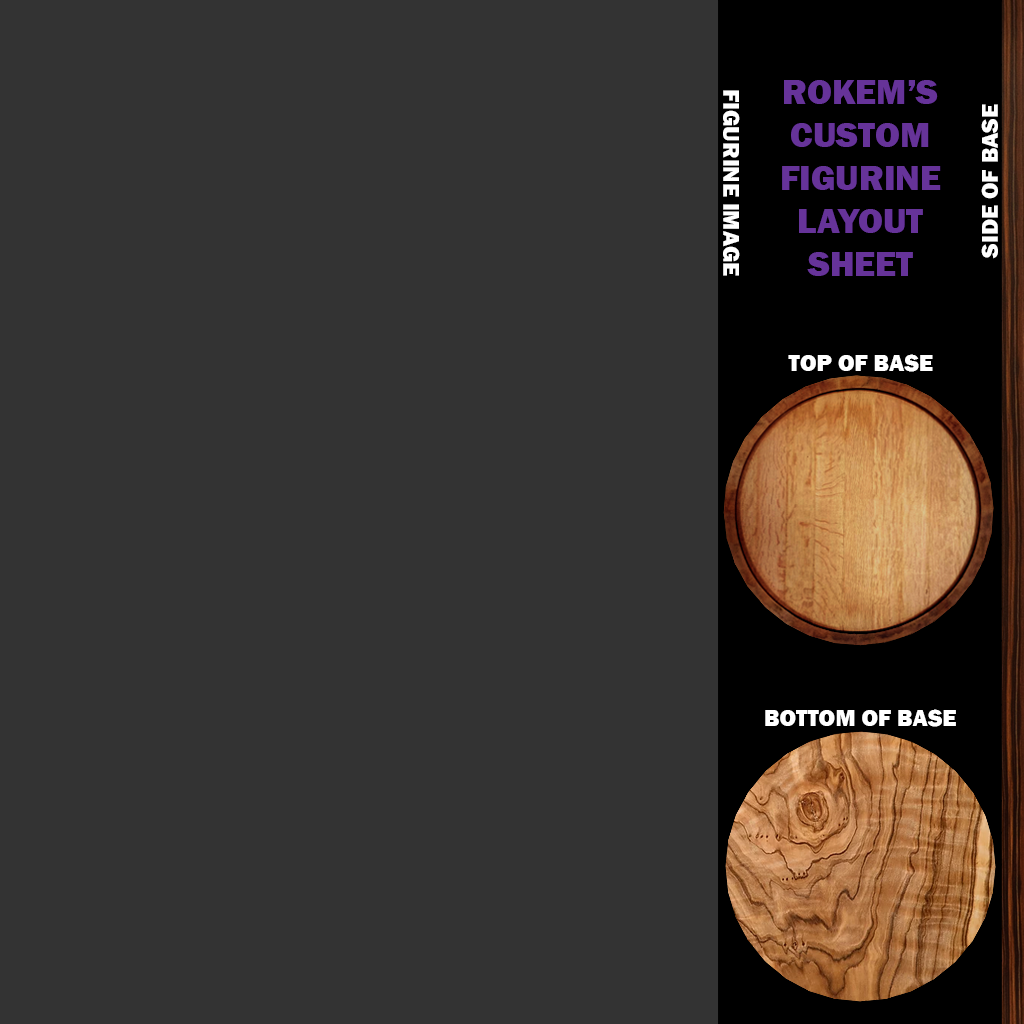
<style>
.page{position:relative;width:1024px;height:1024px;background:#333333}
.page>*{position:absolute;margin:0}
.t1{font:36px "FranklinGothic-Heavy";color:#663399}
.t2{font:23.7px "FranklinGothic-Heavy";color:#ffffff}
.t3{font:24px "FranklinGothic-Heavy";color:#ffffff}
</style>
<div class="page">
<p class="t1" style="left:782px;top:80px;width:159px;height:196px;text-align:center">ROKEM’S CUSTOM FIGURINE LAYOUT SHEET</p>
<p class="t2" style="left:723px;top:90px;width:17px;height:186px;rotate:90deg">FIGURINE IMAGE</p>
<p class="t2" style="left:981px;top:104px;width:17px;height:155px;rotate:-90deg">SIDE OF BASE</p>
<p class="t3" style="left:788px;top:354px;width:145px;height:18px">TOP OF BASE</p>
<p class="t3" style="left:765px;top:709px;width:191px;height:18px">BOTTOM OF BASE</p>
</div>
